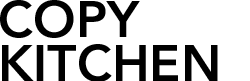
<style>
.page{position:relative;width:250px;height:81px;background:#ffffff}
.page>*{position:absolute;margin:0}
.t1{font:50.9px/44.1px "Avenir-Heavy";color:#000000}
</style>
<div class="page">
<p class="t1" style="left:0px;top:0px;width:218px;height:81px">COPY<br>KITCHEN</p>
</div>
